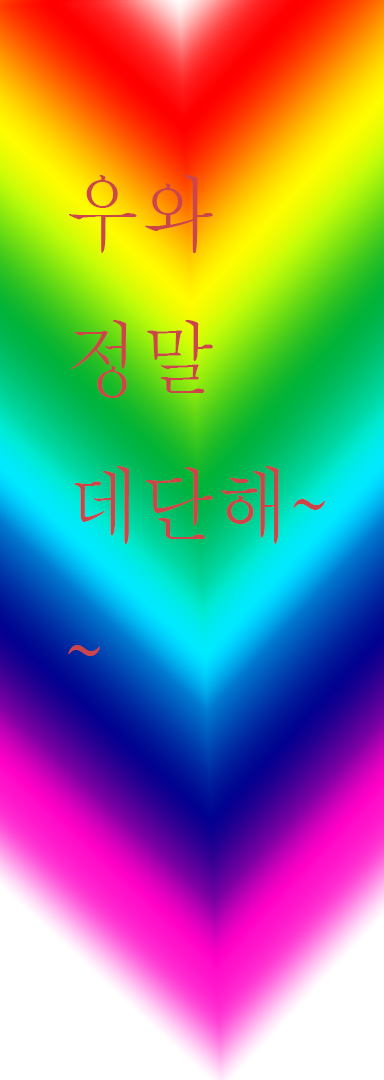
<style>
.page{position:relative;width:384px;height:1080px}
.page>*{position:absolute;margin:0}
.t1{font:83.3px "BatangChe";color:#cc4548;scale:0.9 1}
</style>
<div class="page">
<p class="t1" style="left:68px;top:175px;width:257px;height:481px">우와<br>정말<br>데단해~<br>~</p>
</div>
